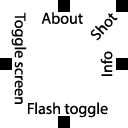
<style>
.page{position:relative;width:128px;height:128px;background:#ffffff}
.page>*{position:absolute;margin:0}
.t1{font:11.7px "MyriadPro-Regular";color:#000000}
.t2{font:12px "MyriadPro-Regular";color:#000000}
</style>
<div class="page">
<p class="t1" style="left:11px;top:12px;width:16px;height:92px;rotate:90deg">Toggle screen</p>
<p class="t2" style="left:41px;top:12px;width:42px;height:12px">About</p>
<p class="t1" style="left:90px;top:13px;width:28px;height:28px;rotate:-48deg">Shot</p>
<p class="t1" style="left:100px;top:51px;width:13px;height:25px;rotate:-90deg">Info</p>
<p class="t2" style="left:28px;top:102px;width:80px;height:16px">Flash toggle</p>
</div>
